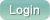
<style>
.page{position:relative;width:50px;height:20px}
.page>*{position:absolute;margin:0}
.t1{font:12px "ArialMT";letter-spacing:0.025em;color:#fefefe}
</style>
<div class="page">
<p class="t1" style="left:10px;top:5px;width:29px;height:12px">Login</p>
</div>
